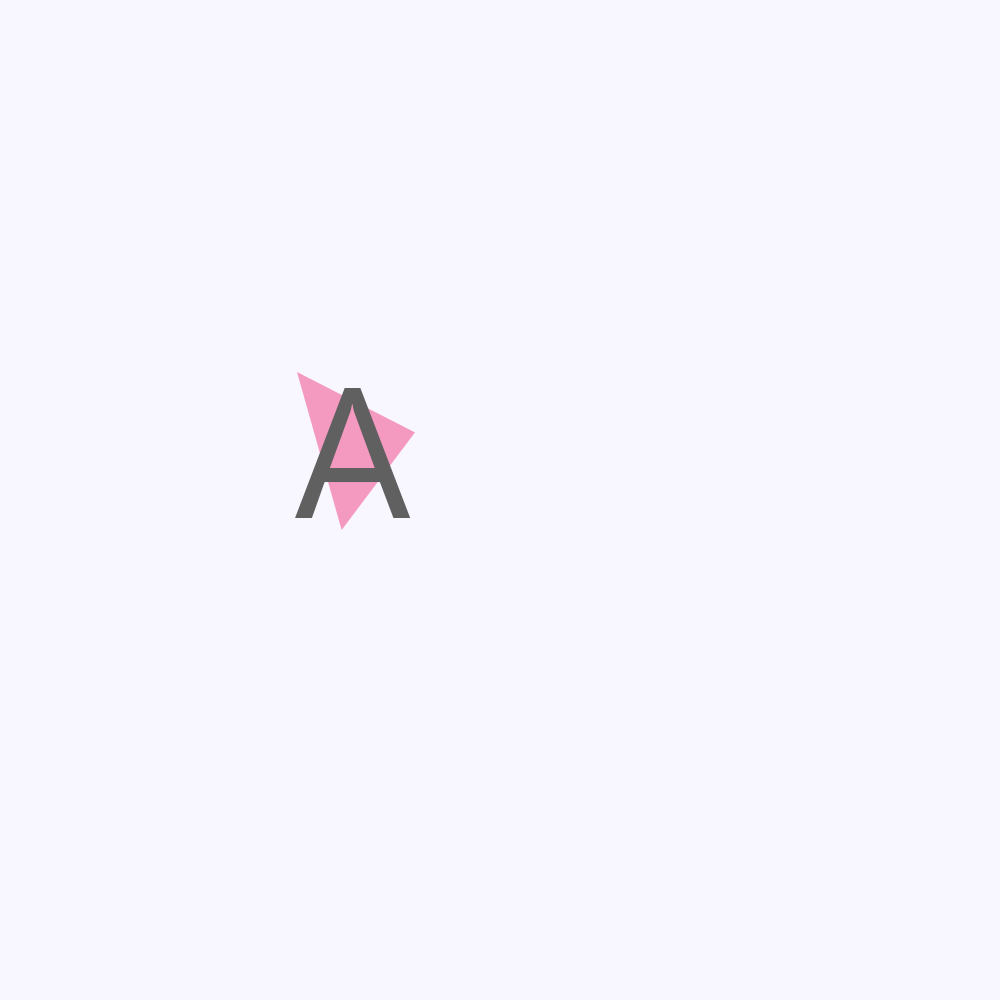
<style>
.page{position:relative;width:1000px;height:1000px;background:#f8f7ff}
.page>*{position:absolute;margin:0}
.t1{font:185.7px "MyanmarText";letter-spacing:-0.085em;color:#606060}
</style>
<div class="page">
<p class="t1" style="left:295px;top:388px;width:116px;height:130px">A</p>
</div>
